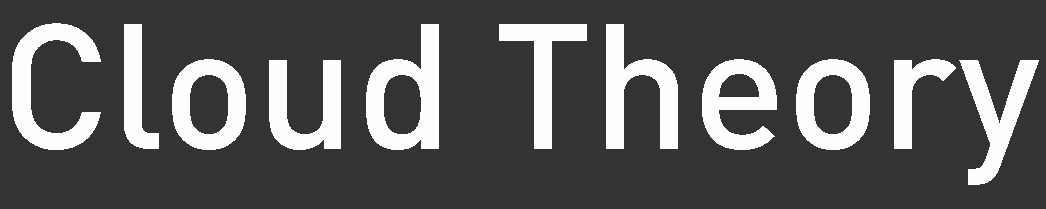
<style>
.page{position:relative;width:1046px;height:209px;background:#333333}
.page>*{position:absolute;margin:0}
.t1{font:175px "DINOT-Medium";color:#fffefe}
</style>
<div class="page">
<p class="t1" style="left:12px;top:23px;width:1027px;height:162px">Cloud Theory</p>
</div>
